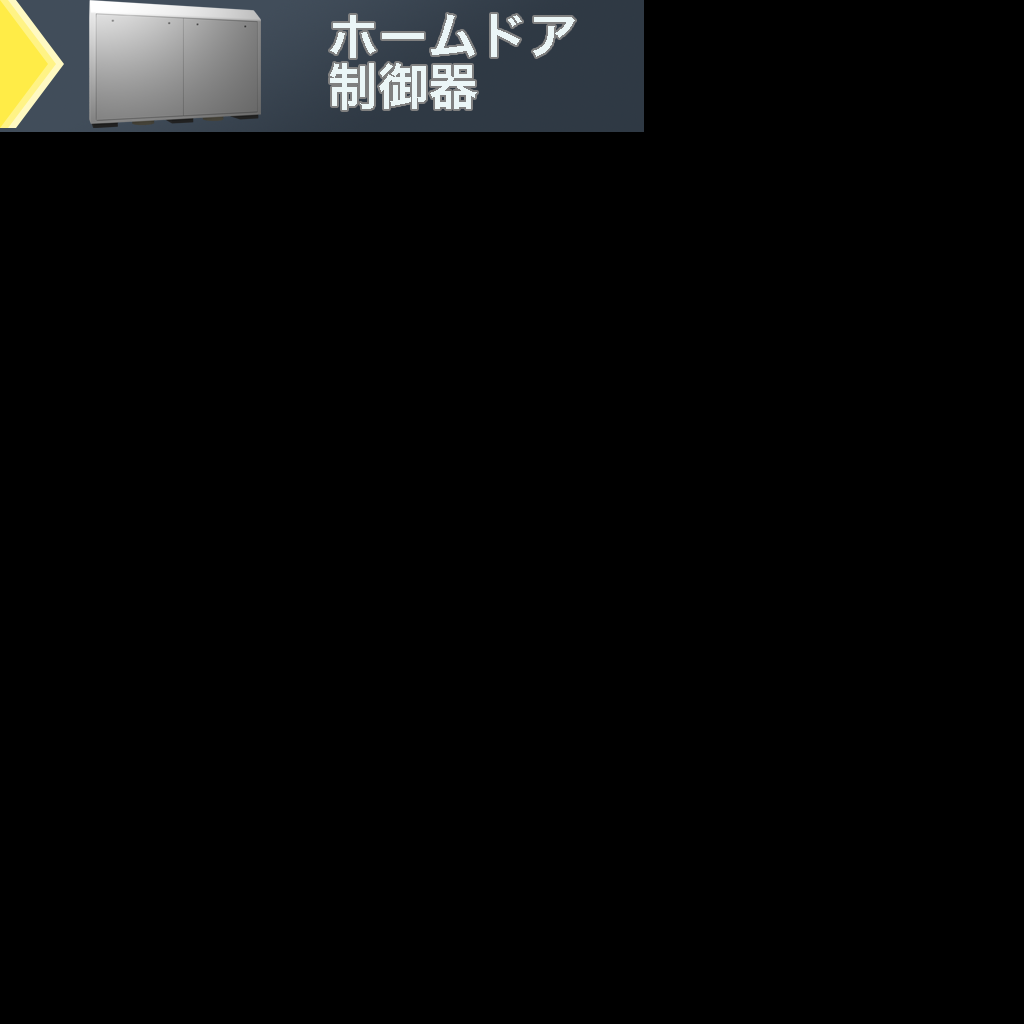
<style>
.page{position:relative;width:1024px;height:1024px;background:#000000}
.page>*{position:absolute;margin:0}
.t1{font:50px/50px "HiraKakuProN-W6";color:#ebf6f7}
</style>
<div class="page">
<p class="t1" style="left:330px;top:14px;width:245px;height:96px">ホームドア<br>制御器</p>
</div>
